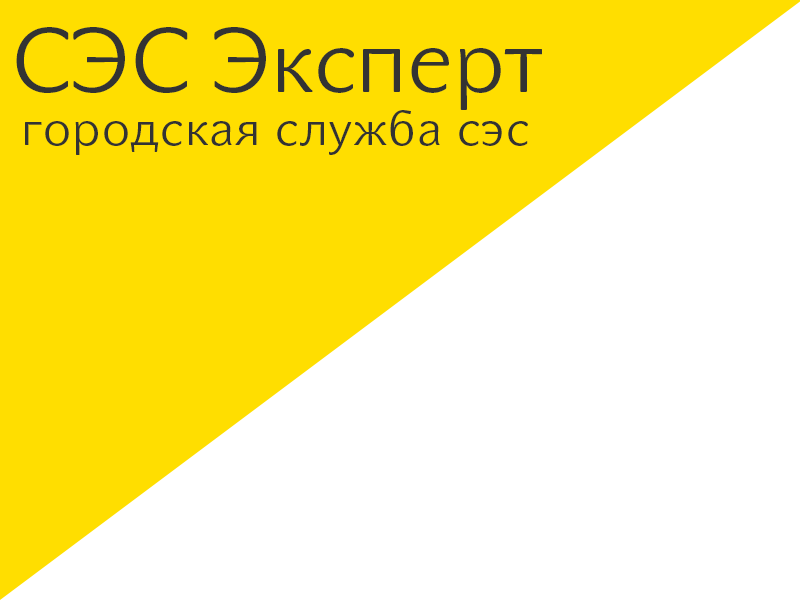
<style>
.page{position:relative;width:800px;height:600px;background:#ffffff}
.page>*{position:absolute;margin:0}
.t1{font:89.4px "JohnSansLitePro";color:#333333}
.t2{font:48.4px "JohnSansLitePro";letter-spacing:0.025em;color:#333333}
</style>
<div class="page">
<p class="t1" style="left:16px;top:27px;width:526px;height:83px">СЭС Эксперт</p>
<p class="t2" style="left:25px;top:110px;width:503px;height:45px">городская служба сэс</p>
</div>
